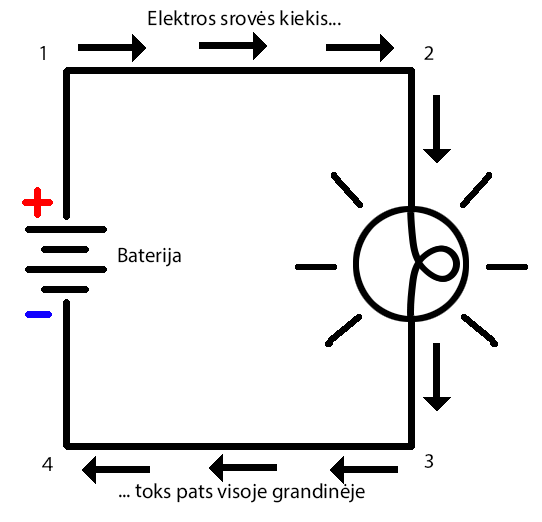
<style>
.page{position:relative;width:542px;height:522px;background:#ffffff}
.page>*{position:absolute;margin:0}
.t1{font:20.8px "MyriadPro-Regular";color:#000000}
</style>
<div class="page">
<p class="t1" style="left:148px;top:10px;width:193px;height:16px">Elektros srovės kiekis...</p>
<p class="t1" style="left:40px;top:46px;width:5px;height:14px">1</p>
<p class="t1" style="left:424px;top:46px;width:10px;height:14px">2</p>
<p class="t1" style="left:118px;top:247px;width:63px;height:20px">Baterija</p>
<p class="t1" style="left:42px;top:457px;width:11px;height:14px">4</p>
<p class="t1" style="left:424px;top:454px;width:10px;height:14px">3</p>
<p class="t1" style="left:119px;top:483px;width:246px;height:20px">... toks pats visoje grandinėje</p>
</div>
